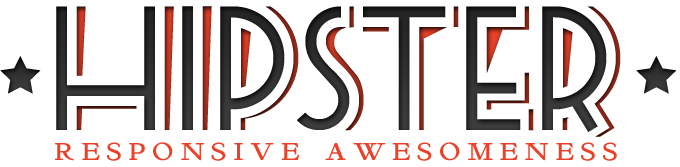
<style>
.page{position:relative;width:680px;height:167px;background:#ffffff}
.page>*{position:absolute;margin:0}
.t1{font:25.1px "KelmscottRoman";letter-spacing:0.28em;color:#ea4128;text-transform:uppercase}
</style>
<div class="page">
<p class="t1" style="left:55px;top:142px;width:562px;height:19px">responsive awesomeness</p>
</div>
